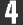
<style>
.page{position:relative;width:23px;height:25px;background:#333333}
.page>*{position:absolute;margin:0}
.t1{font:38.9px "VT323-Regular";color:#ffffff;font-weight:bold;scale:0.9 1}
</style>
<div class="page">
<p class="t1" style="left:5px;top:0px;width:13px;height:24px">4</p>
</div>
